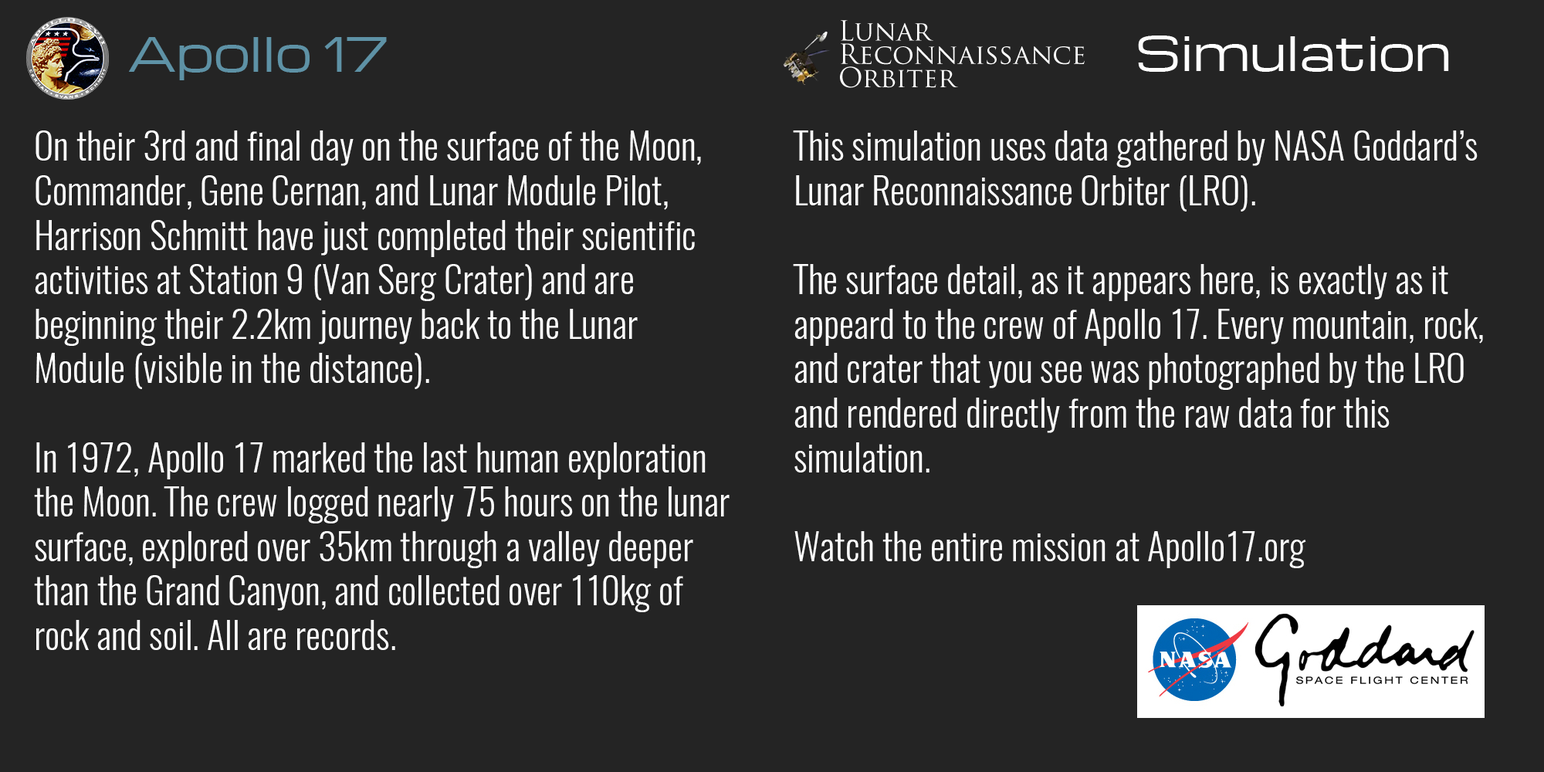
<style>
.page{position:relative;width:1544px;height:772px;background:#242424}
.page>*{position:absolute;margin:0}
.t1{font:46.3px "Michroma";color:#5e92a6}
.t2{font:37.1px "Oswald-Light";color:#ffffff}
</style>
<div class="page">
<p class="t1" style="left:129px;top:37px;width:258px;height:43px">Apollo 17</p>
<p class="t2" style="left:34px;top:130px;width:696px;height:520px">On their 3rd and final day on the surface of the Moon, Commander, Gene Cernan, and Lunar Module Pilot, Harrison Schmitt have just completed their scientific activities at Station 9 (Van Serg Crater) and are beginning their 2.2km journey back to the Lunar Module (visible in the distance).<br><br>In 1972, Apollo 17 marked the last human exploration the Moon. The crew logged nearly 75 hours on the lunar surface, explored over 35km through a valley deeper than the Grand Canyon, and collected over 110kg of rock and soil. All are records.</p>
<p class="t2" style="left:793px;top:130px;width:690px;height:438px">This simulation uses data gathered by NASA Goddard’s Lunar Reconnaissance Orbiter (LRO).<br><br>The surface detail, as it appears here, is exactly as it appeard to the crew of Apollo 17. Every mountain, rock, and crater that you see was photographed by the LRO and rendered directly from the raw data for this simulation.<br><br>Watch the entire mission at Apollo17.org</p>
</div>
